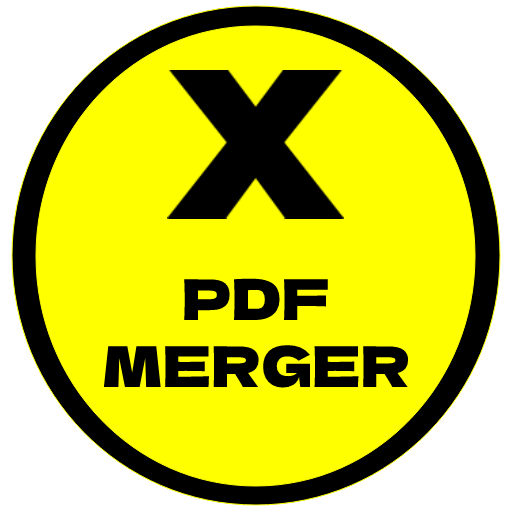
<style>
.page{position:relative;width:512px;height:512px;background:#ffff00}
.page>*{position:absolute;margin:0}
.t1{font:56px "DelaGothicOne-Regular";color:#000000}
</style>
<div class="page">
<p class="t1" style="left:103px;top:278px;width:306px;height:110px;text-align:center">PDF<br>MERGER</p>
</div>
